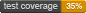
<style>
.page{position:relative;width:86px;height:13px}
.page>*{position:absolute;margin:0}
.t1{font:10px "ArialMT";color:#cccccc;scale:0.9 1}
.t2{font:8px "Helvetica";color:#ffffff}
</style>
<div class="page">
<p class="t1" style="left:3px;top:2px;width:55px;height:9px">test coverage</p>
<p class="t2" style="left:66px;top:3px;width:17px;height:6px">35%</p>
</div>
